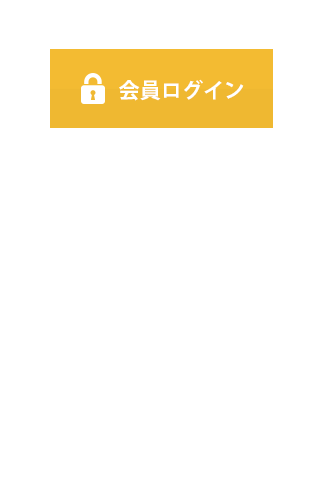
<style>
.page{position:relative;width:324px;height:490px;background:#ffffff}
.page>*{position:absolute;margin:0}
.t1{font:21px "KozGoPr6N-Bold";color:#ffffff;text-transform:uppercase}
</style>
<div class="page">
<p class="t1" style="left:119px;top:79px;width:125px;height:22px">会員ログイン</p>
</div>
